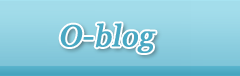
<style>
.page{position:relative;width:240px;height:76px}
.page>*{position:absolute;margin:0}
.t1{font:30px "Georgia";color:#49a8c3;font-weight:bold;font-style:italic}
</style>
<div class="page">
<p class="t1" style="left:60px;top:23px;width:96px;height:30px">O-blog</p>
</div>
